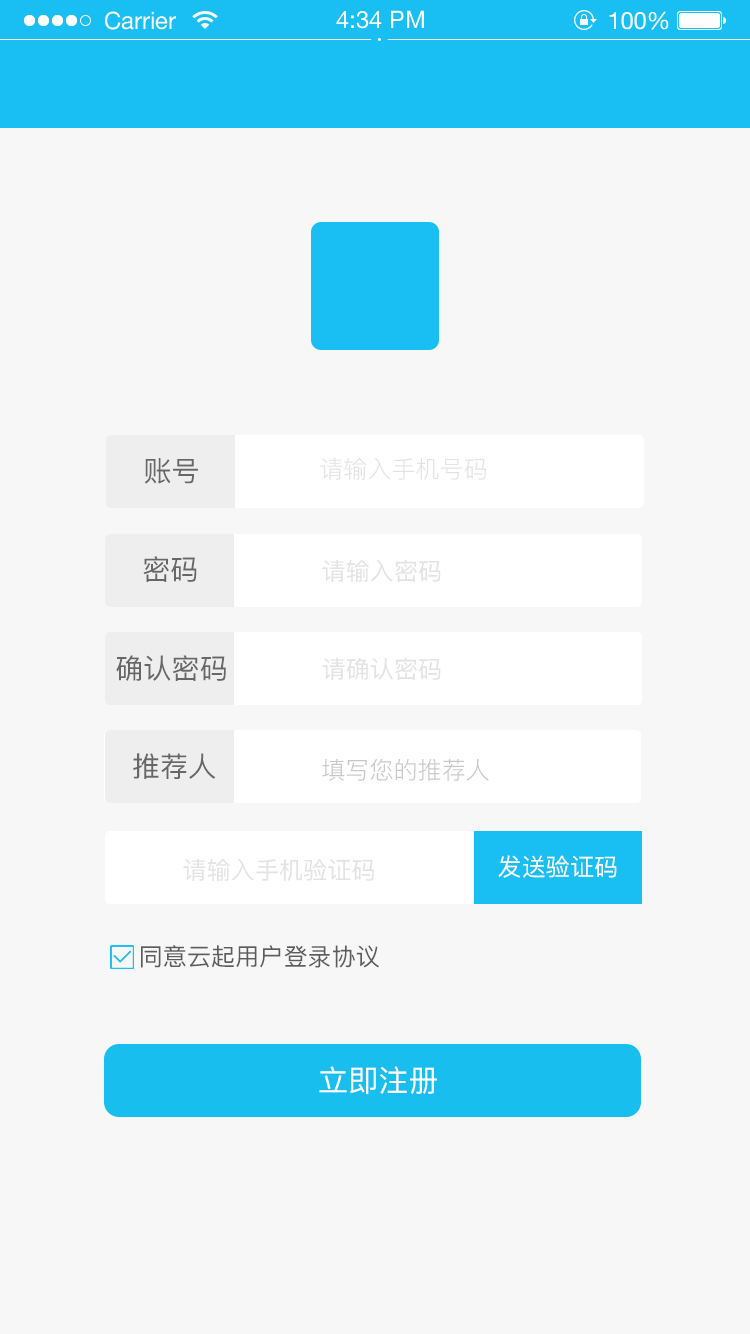
<style>
.page{position:relative;width:750px;height:1334px;background:#f7f7f7}
.page>*{position:absolute;margin:0}
.t1{font:28px "PingFang-SC-Medium";letter-spacing:0.005em;color:#676767}
.t2{font:24px "PingFang-SC-Regular";letter-spacing:0.005em;color:#e4e3e3}
.t3{font:24px "PingFang-SC-Medium";letter-spacing:0.005em;color:#e4e3e3}
.t4{font:24px "PingFang-SC-Regular";letter-spacing:0.005em;color:#c9c8c8}
.t5{font:24px "PingFang-SC-Medium";letter-spacing:0.005em;color:#ffffff}
.t6{font:24px "PingFang-SC-Medium";letter-spacing:0.005em;color:#5c5c5c}
.t7{font:30px "PingFang-SC-Medium";letter-spacing:0.005em;color:#ffffff}
</style>
<div class="page">
<p class="t1" style="left:144px;top:458px;width:54px;height:26px">账号</p>
<p class="t2" style="left:320px;top:458px;width:166px;height:22px">请输入手机号码</p>
<p class="t1" style="left:143px;top:556px;width:54px;height:26px">密码</p>
<p class="t3" style="left:322px;top:559px;width:119px;height:23px">请输入密码</p>
<p class="t1" style="left:116px;top:655px;width:110px;height:26px">确认密码</p>
<p class="t3" style="left:322px;top:657px;width:119px;height:23px">请确认密码</p>
<p class="t1" style="left:133px;top:753px;width:83px;height:26px">推荐人</p>
<p class="t4" style="left:322px;top:758px;width:167px;height:23px">填写您的推荐人</p>
<p class="t5" style="left:498px;top:855px;width:119px;height:23px">发送验证码</p>
<p class="t3" style="left:183px;top:858px;width:191px;height:23px">请输入手机验证码</p>
<p class="t6" style="left:141px;top:945px;width:238px;height:23px">同意云起用户登录协议</p>
<p class="t7" style="left:319px;top:1066px;width:118px;height:28px">立即注册</p>
</div>
